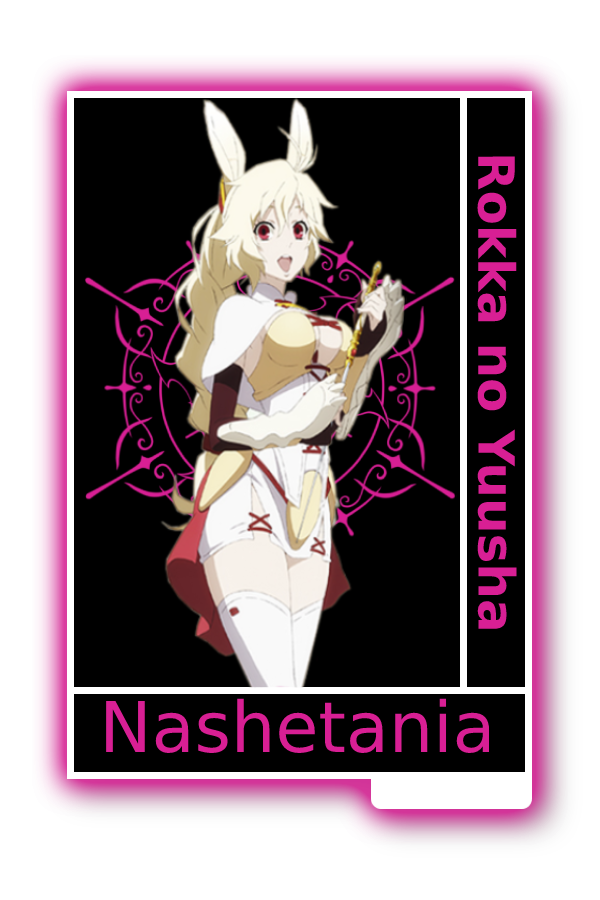
<style>
.page{position:relative;width:600px;height:900px;background:#000000}
.page>*{position:absolute;margin:0}
.t1{font:50px "MADETOMMY-Bold";color:#d81f94}
.t2{font:70px "CoolveticaRg-Regular";color:#d81f94}
</style>
<div class="page">
<p class="t1" style="left:477px;top:156px;width:40px;height:473px;rotate:90deg">Rokka no Yuusha</p>
<p class="t2" style="left:106px;top:698px;width:384px;height:55px">Nashetania</p>
</div>
